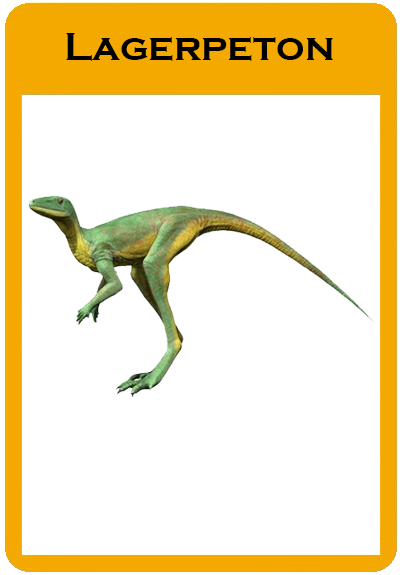
<style>
.page{position:relative;width:400px;height:575px;background:#ffffff}
.page>*{position:absolute;margin:0}
.t1{font:40px "CopperplateGothic-Bold";color:#000000}
</style>
<div class="page">
<p class="t1" style="left:66px;top:33px;width:267px;height:28px">Lagerpeton</p>
</div>
